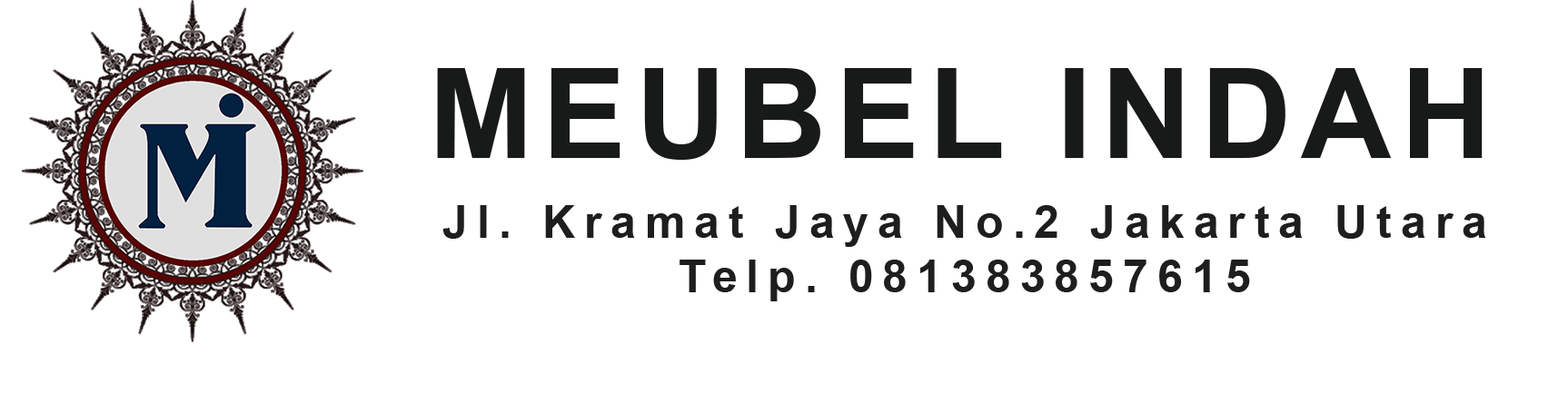
<style>
.page{position:relative;width:1568px;height:403px;background:#ffffff}
.page>*{position:absolute;margin:0}
.t1{font:125.5px "Arial-BoldMT";letter-spacing:0.075em;color:#181919}
.t2{font:45.4px "Arial-BoldMT";letter-spacing:0.2em;color:#1e1e1e}
</style>
<div class="page">
<p class="t1" style="left:437px;top:68px;width:1046px;height:92px">MEUBEL INDAH</p>
<p class="t2" style="left:442px;top:205px;width:1044px;height:97px;text-align:center">Jl. Kramat Jaya No.2 Jakarta Utara<br>Telp. 081383857615</p>
</div>
